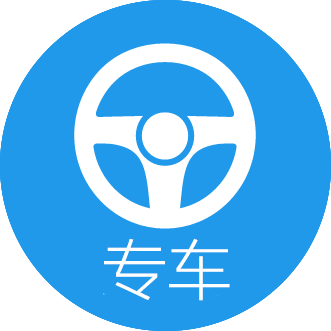
<style>
.page{position:relative;width:331px;height:331px;background:#2099ea}
.page>*{position:absolute;margin:0}
.t1{font:65px "FZLTXHK--GBK1-0";color:#ffffff}
</style>
<div class="page">
<p class="t1" style="left:104px;top:238px;width:126px;height:63px">专车</p>
</div>
